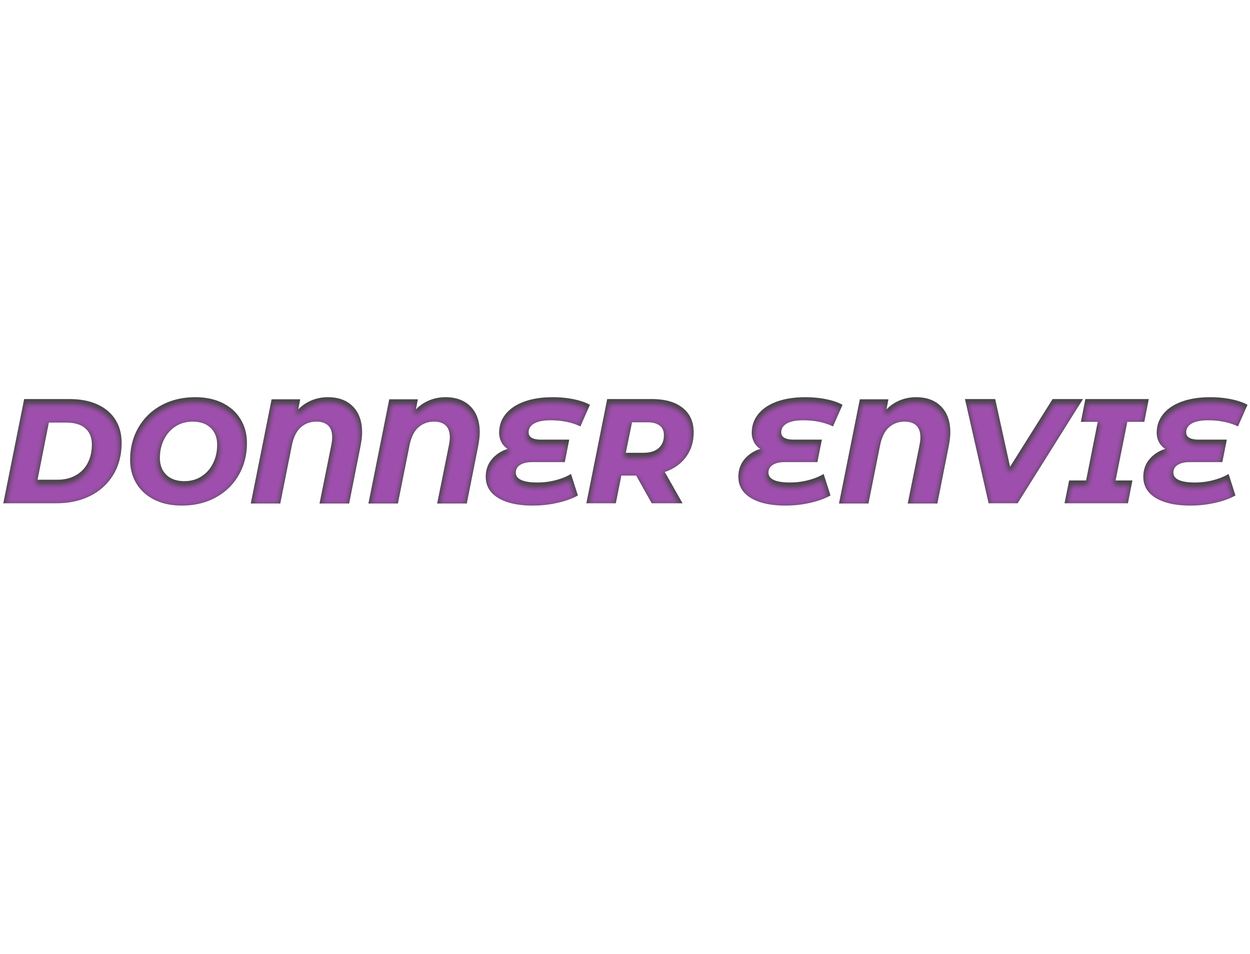
<style>
.page{position:relative;width:1250px;height:954px;background:#ffffff}
.page>*{position:absolute;margin:0}
.t1{font:148.8px "MontserratAlternates-ExtraBoldItalic";letter-spacing:-0.005em;color:#9d4fab}
</style>
<div class="page">
<p class="t1" style="left:3px;top:397px;width:1245px;height:109px">DONNER ENVIE</p>
</div>
